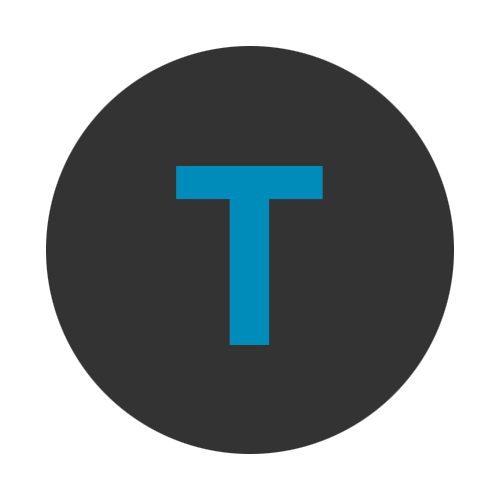
<style>
.page{position:relative;width:500px;height:500px;background:#ffffff}
.page>*{position:absolute;margin:0}
.t1{font:250px "HelveticaNeue-Bold";color:#008cba}
</style>
<div class="page">
<p class="t1" style="left:176px;top:166px;width:147px;height:179px">T</p>
</div>
